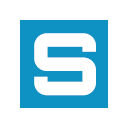
<style>
.page{position:relative;width:128px;height:128px;background:#ffffff}
.page>*{position:absolute;margin:0}
.t1{font:86px "Orbitron-Black";letter-spacing:-0.02em;color:#ffffff}
</style>
<div class="page">
<p class="t1" style="left:34px;top:33px;width:62px;height:63px">S</p>
</div>
